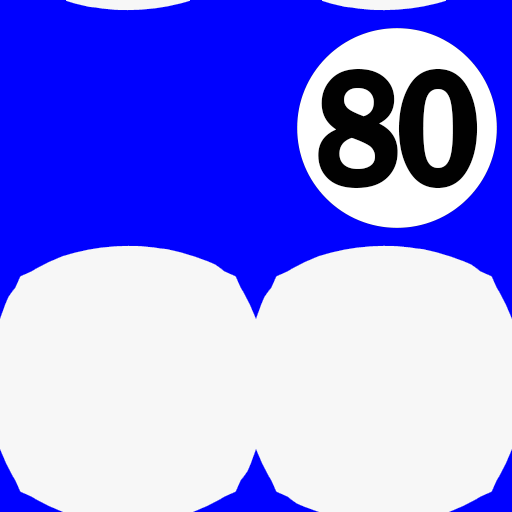
<style>
.page{position:relative;width:512px;height:512px;background:#f7f7f7}
.page>*{position:absolute;margin:0}
.t1{font:172.5px "FranklinGothic-Demi";letter-spacing:-0.05em;color:#010101;scale:0.87 1}
</style>
<div class="page">
<p class="t1" style="left:318px;top:69px;width:160px;height:119px">80</p>
</div>
